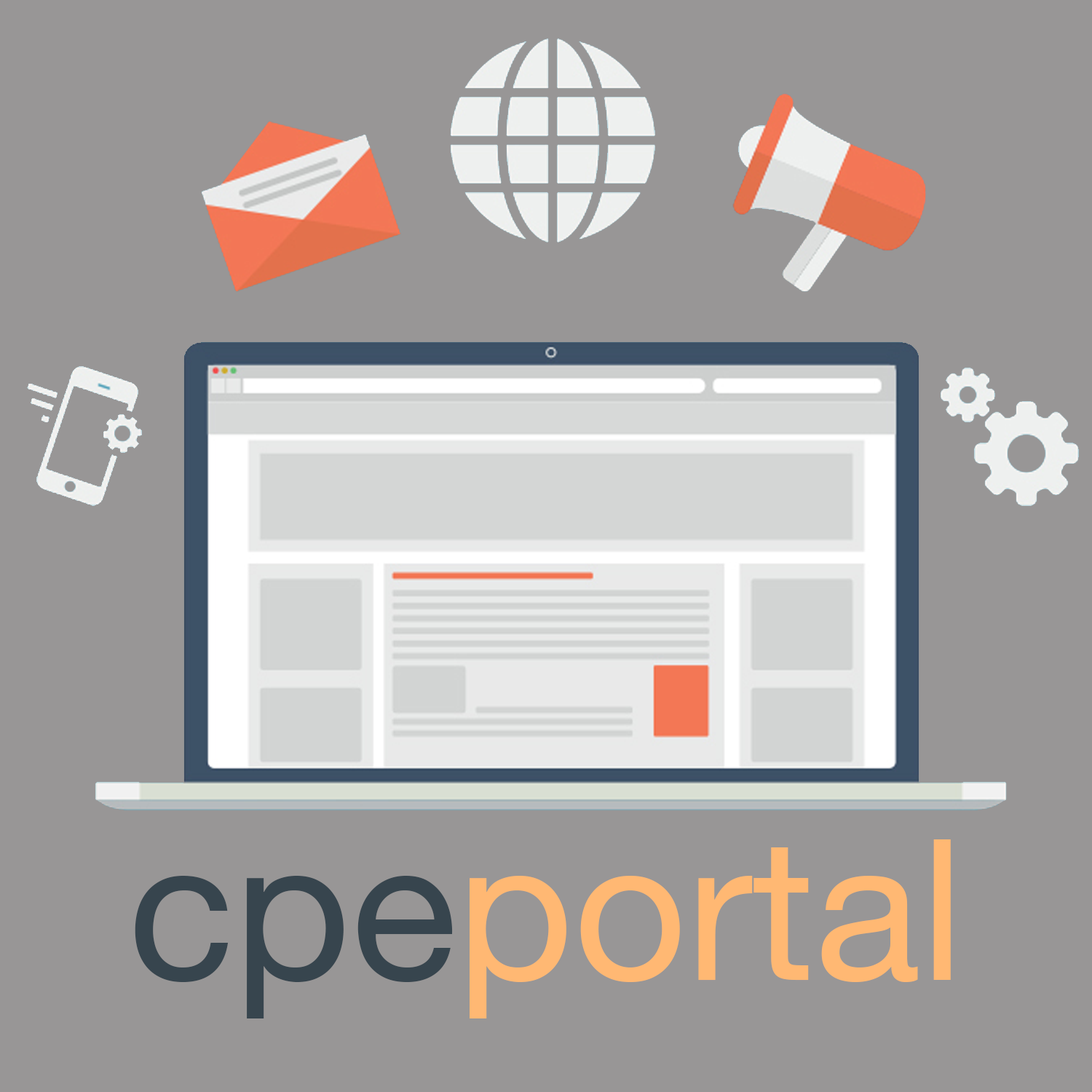
<style>
.page{position:relative;width:1092px;height:1092px;background:#989696}
.page>*{position:absolute;margin:0}
.t1{font:197.2px "HelveticaNeue";color:#ffb873}
.t2{font:197.2px "HelveticaNeue";color:#37454e}
</style>
<div class="page">
<p class="t1" style="left:135px;top:839px;width:816px;height:179px"><span class="t2">cpe</span>portal</p>
</div>
